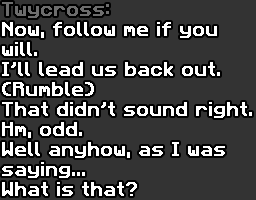
<style>
.page{position:relative;width:256px;height:200px;background:#333333}
.page>*{position:absolute;margin:0}
.t1{font:16px/20px "Mineglyph-Faithful";color:#ffffff;font-weight:bold;scale:1.03 1}
.t2{font:16px/20px "Mineglyph-Faithful";color:#6d6d6d;font-weight:bold;scale:1.03 1}
</style>
<div class="page">
<p class="t1" style="left:2px;top:2px;width:250px;height:194px"><span class="t2">Twycross:<br></span>Now, follow me if you<br>will.<br>I’ll lead us back out.<br>(Rumble)<br>That didn’t sound right.<br>Hm, odd.<br>Well anyhow, as I was<br>saying...<br>What is that?</p>
</div>
